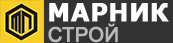
<style>
.page{position:relative;width:173px;height:43px;background:#333333}
.page>*{position:absolute;margin:0}
.t1{font:24px "Verdana-Bold";color:#fefefe;font-weight:bold}
.t2{font:20px "ArialMT";color:#bab9b9;font-weight:bold}
</style>
<div class="page">
<p class="t1" style="left:49px;top:3px;width:120px;height:19px">МАРНИК</p>
<p class="t2" style="left:48px;top:23px;width:70px;height:20px">СТРОЙ</p>
</div>
